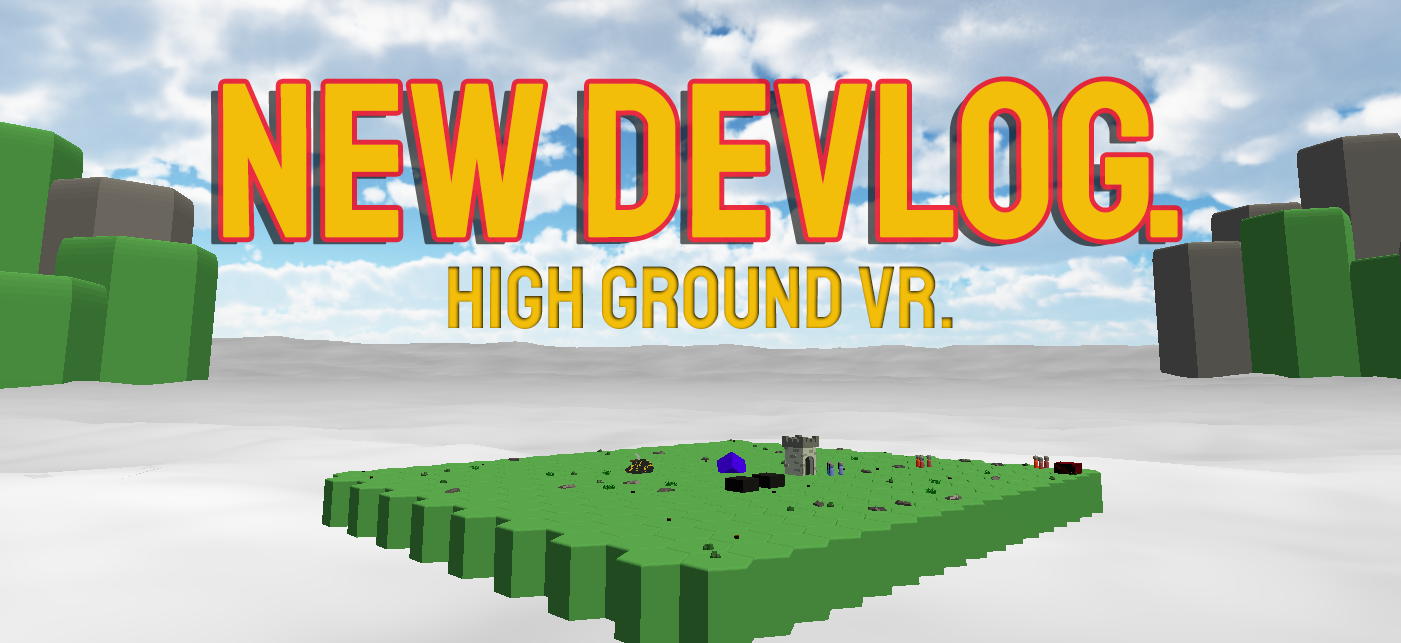
<style>
.page{position:relative;width:1401px;height:643px}
.page>*{position:absolute;margin:0}
.t1{font:220px "Staatliches-Regular";color:#f3be09}
.t2{font:88px "Staatliches-Regular";color:#f3be09}
</style>
<div class="page">
<p class="t1" style="left:223px;top:81px;width:955px;height:159px">New Devlog.</p>
<p class="t2" style="left:448px;top:265px;width:505px;height:64px">HiGh Ground VR.</p>
</div>
